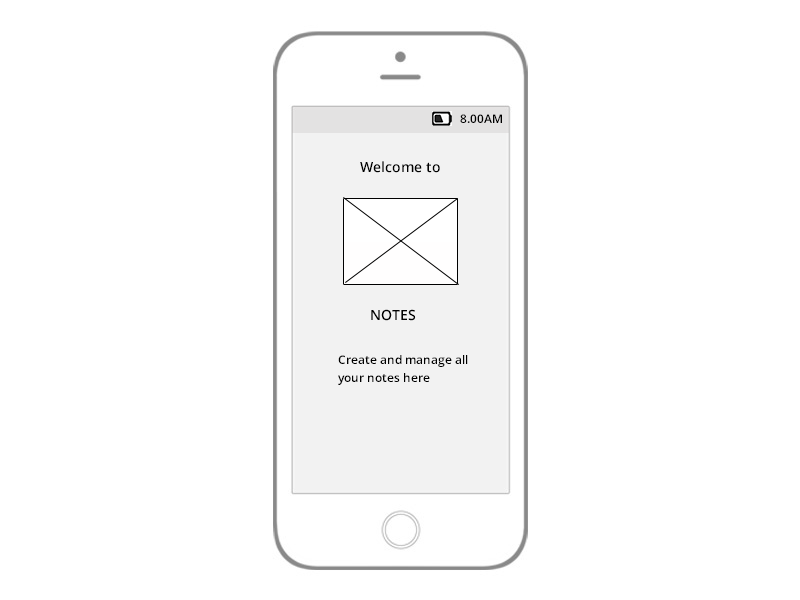
<style>
.page{position:relative;width:800px;height:600px;background:#ffffff}
.page>*{position:absolute;margin:0}
.t1{font:12px "OpenSans-Semibold";color:#000000}
.t2{font:14px "OpenSans-Semibold";color:#000000}
.t3{font:12px/6px "OpenSans-Semibold";color:#000000}
</style>
<div class="page">
<p class="t1" style="left:460px;top:114px;width:42px;height:9px">8.00AM</p>
<p class="t2" style="left:360px;top:161px;width:80px;height:12px">Welcome to</p>
<p class="t2" style="left:371px;top:309px;width:45px;height:12px">NOTES</p>
<p class="t3" style="left:338px;top:355px;width:130px;height:30px">Create and manage all<br><br> <br>your notes here</p>
</div>
